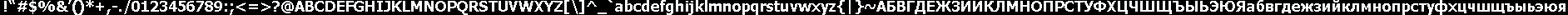
<style>
.page{position:relative;width:1568px;height:15px;background:#000000}
.page>*{position:absolute;margin:0}
.t1{font:15px "Tahoma-Bold";color:#ffffff}
</style>
<div class="page">
<p class="t1" style="left:4px;top:0px;width:1562px;height:15px">!“#$%&amp;’()*+,-./0123456789:;&lt;=&gt;?@ABCDEFGHIJKLMNOPQRSTUVWXYZ[\]^_`abcdefghijklmnopqrstuvwxyz{|}~АБВГДЕЖЗИЙКЛМНОПРСТУФХЦЧШЩЪЫЬЭЮЯабвгдежзийклмнопрстуфхцчшщъыьэюя</p>
</div>
